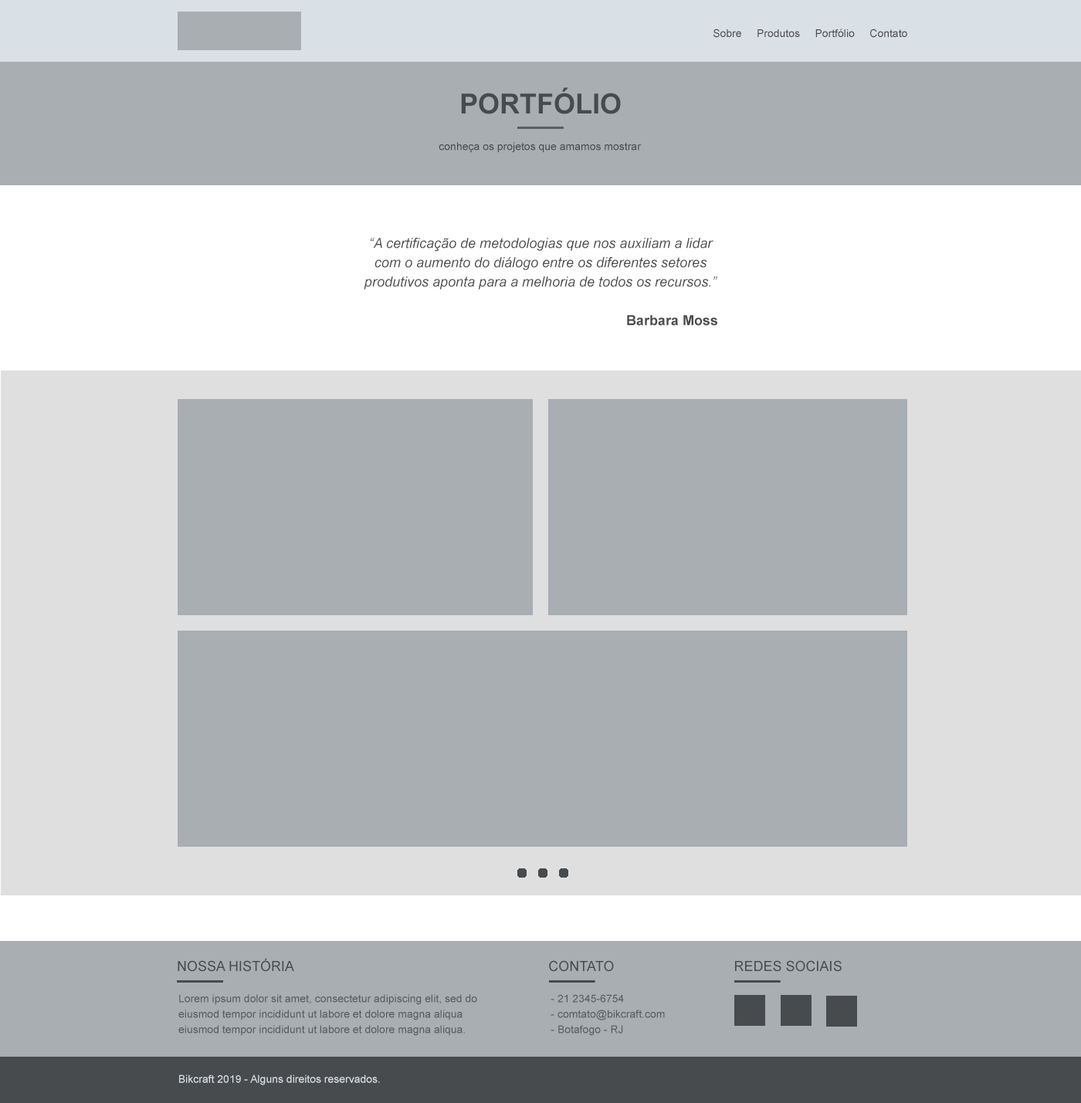
<style>
.page{position:relative;width:1081px;height:1103px;background:#a9aeb3}
.page>*{position:absolute;margin:0}
.t1{font:10.8px "ArialMT";color:#484b4d}
.t2{font:27.8px "Arial-BoldMT";color:#484b4d;text-transform:uppercase}
.t3{font:13.9px/19.3px "Arial-ItalicMT";color:#484b4d}
.t4{font:13.9px/19.3px "Arial-BoldMT";color:#484b4d}
.t5{font:13.9px "ArialMT";color:#484b4d;text-transform:uppercase}
.t6{font:10.8px/15.5px "ArialMT";color:#484b4d}
.t7{font:10.8px "ArialMT";color:#d9e0e6}
</style>
<div class="page">
<p class="t1" style="left:713px;top:29px;width:194px;height:9px">Sobre     Produtos     Portfólio     Contato</p>
<p class="t2" style="left:461px;top:87px;width:160px;height:27px">portfólio</p>
<p class="t1" style="left:439px;top:142px;width:203px;height:11px">conheça os projetos que amamos mostrar</p>
<p class="t3" style="left:364px;top:238px;width:353px;height:88px;text-align:center">“A certificação de metodologias que nos auxiliam a lidar com o aumento do diálogo entre os diferentes setores produtivos aponta para a melhoria de todos os recursos.”<br><br><span class="t4">Barbara Moss</span></p>
<p class="t5" style="left:178px;top:958px;width:116px;height:14px">Nossa História</p>
<p class="t5" style="left:549px;top:960px;width:65px;height:12px">CONTATO</p>
<p class="t5" style="left:735px;top:960px;width:107px;height:12px">REDES SOCIAIS</p>
<p class="t6" style="left:178px;top:994px;width:299px;height:42px;opacity:0.88">Lorem ipsum dolor sit amet, consectetur adipiscing elit, sed do eiusmod tempor incididunt ut labore et dolore magna aliqua<br>eiusmod tempor incididunt ut labore et dolore magna aliqua.</p>
<p class="t6" style="left:550px;top:994px;width:115px;height:42px;opacity:0.88">- 21 2345-6754<br>- comtato@bikcraft.com<br>- Botafogo - RJ</p>
<p class="t7" style="left:179px;top:1075px;width:201px;height:10px">Bikcraft 2019 - Alguns direitos reservados.</p>
</div>
